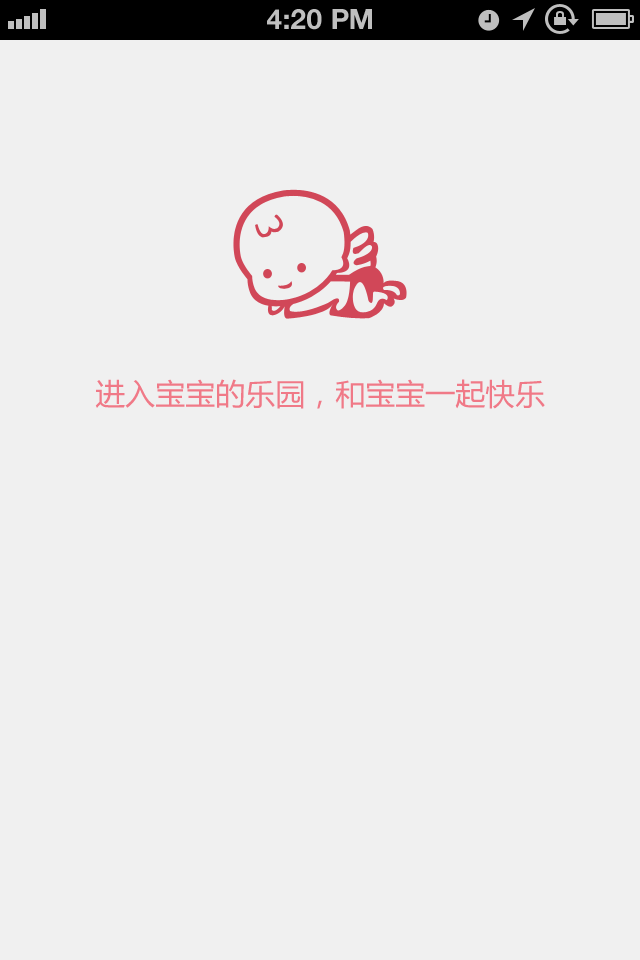
<style>
.page{position:relative;width:640px;height:960px;background:#f0f0f0}
.page>*{position:absolute;margin:0}
.t1{font:28px "HelveticaNeue-Bold";color:#bfbfbf;text-transform:uppercase}
.t2{font:30px "MicrosoftYaHei";color:#f07987}
</style>
<div class="page">
<p class="t1" style="left:267px;top:9px;width:105px;height:21px">4:20 PM</p>
<p class="t2" style="left:95px;top:379px;width:450px;height:30px">进入宝宝的乐园，和宝宝一起快乐</p>
</div>
